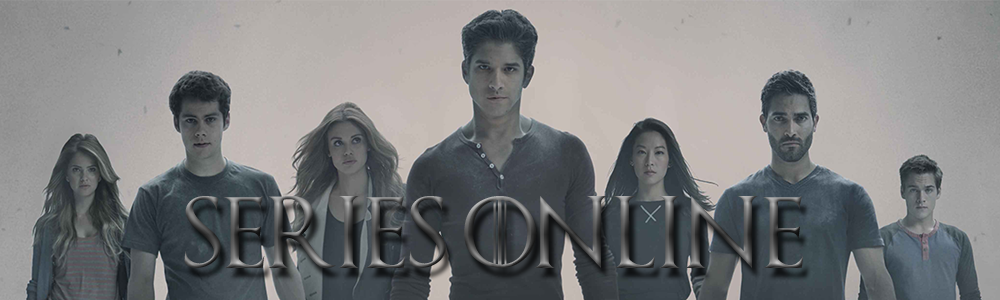
<style>
.page{position:relative;width:1000px;height:300px}
.page>*{position:absolute;margin:0}
.t1{font:72px "GameofThrones"}
</style>
<div class="page">
<p class="t1" style="left:184px;top:196px;width:620px;height:72px">Series Online.</p>
</div>
